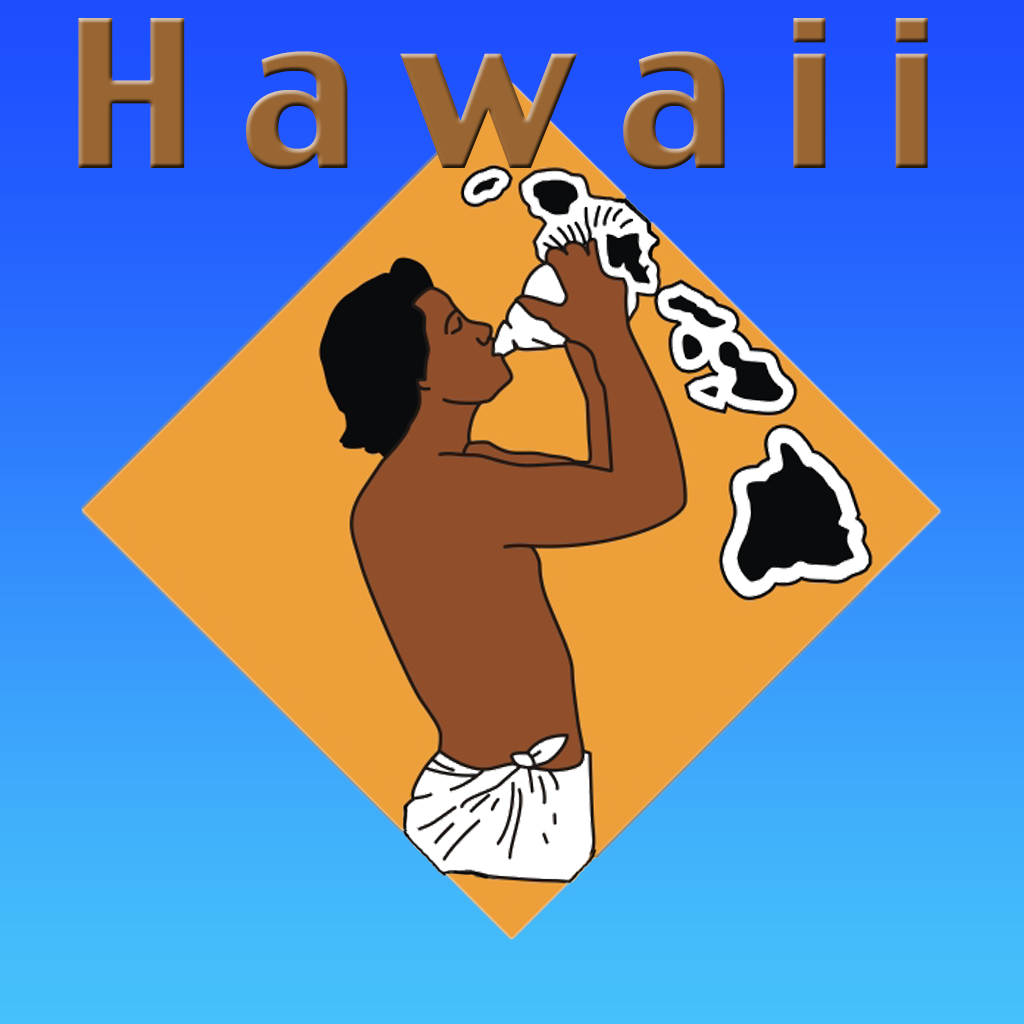
<style>
.page{position:relative;width:1024px;height:1024px}
.page>*{position:absolute;margin:0}
.t1{font:200px "CharcoalCY";letter-spacing:0.2em;color:#996633}
</style>
<div class="page">
<p class="t1" style="left:78px;top:18px;width:850px;height:152px">Hawaii</p>
</div>
